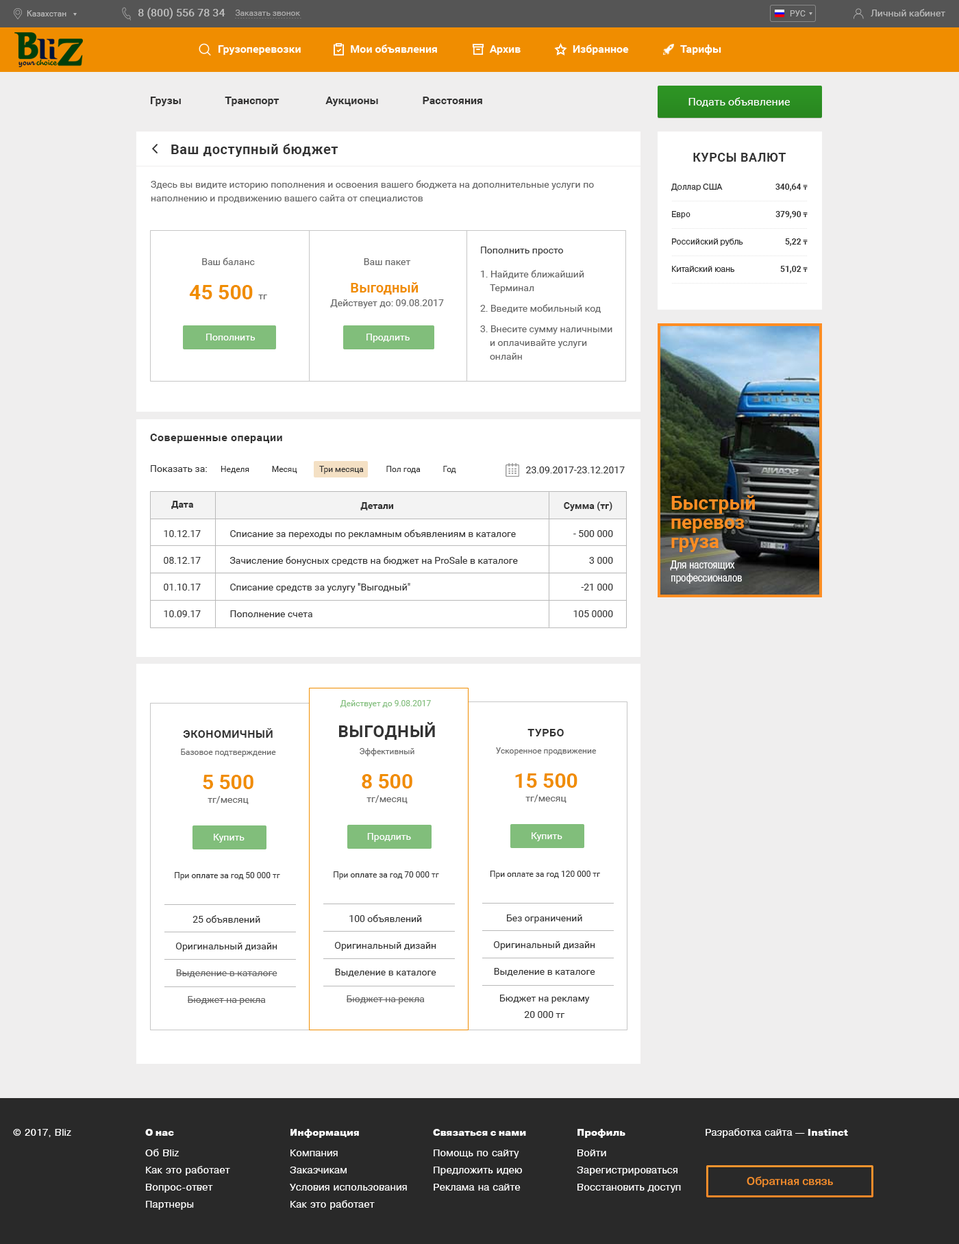
<style>
.page{position:relative;width:959px;height:1244px;background:#efeeee}
.page>*{position:absolute;margin:0}
.t1{font:11px "Roboto-Bold";color:#333333}
.t2{font:11px "Roboto-Regular";color:#ffffff}
.t3{font:13.7px "Roboto-Bold";letter-spacing:0.03em;color:#333333}
.t4{font:12.3px "Roboto-Bold";letter-spacing:0.03em;color:#333333;text-transform:uppercase}
.t5{font:9.6px/13.7px "Roboto-Regular";color:#666666}
.t6{font:8.2px/27.4px "PragmaticaBook-Reg";color:#333333}
.t7{font:9.6px/27.4px "PragmaticaBlack";letter-spacing:0.03em;color:#333333;text-transform:uppercase}
.t8{font:8.2px/27.4px "Roboto-Bold";color:#303030}
.t9{font:6.8px/27.4px "TimesNewRomanPS-BoldMT";color:#303030}
.t10{font:20.5px/13.7px "Roboto-Bold";color:#f08d00}
.t11{font:9.6px/16.4px "Roboto-Regular";color:#333333}
.t12{font:13.7px/13.7px "Roboto-Bold";color:#f08d00}
.t13{font:9.6px "Roboto-Regular";color:#ffffff}
.t14{font:11px "Roboto-Bold";letter-spacing:0.03em;color:#333333}
.t15{font:9.6px "Roboto-Regular";color:#333333}
.t16{font:8.2px "Roboto-Regular";color:#333333}
.t17{font:9.6px "Roboto-Bold";color:#333333}
.t18{font:8.2px "Roboto-Regular";color:#81be7b}
.t19{font:8.2px/13.7px "Roboto-Regular";color:#333333}
.t20{font:16.4px/13.7px "Roboto-Bold";letter-spacing:0.03em;color:#333333;text-transform:uppercase}
.t21{font:8.2px/13.7px "Roboto-Regular";color:#666666}
.t22{font:11px/13.7px "Roboto-Bold";letter-spacing:0.03em;color:#333333;text-transform:uppercase}
.t23{font:9.6px/16.4px "Roboto-Regular";color:#666666}
</style>
<div class="page">
<p class="t1" style="left:151px;top:97px;width:331px;height:9px">Грузы                Транспорт                 Аукционы                Расстояния</p>
<p class="t2" style="left:688px;top:97px;width:102px;height:10px">Подать объявление</p>
<p class="t3" style="left:171px;top:144px;width:167px;height:13px">Ваш доступный бюджет</p>
<p class="t4" style="left:693px;top:153px;width:93px;height:9px">Курсы валют</p>
<p class="t5" style="left:151px;top:180px;width:443px;height:23px">Здесь вы видите историю пополнения и освоения вашего бюджета на дополнительные услуги по наполнению и продвижению вашего сайта от специалистов</p>
<p class="t6" style="left:671px;top:184px;width:72px;height:88px;text-align:center"><span class="t7"><br></span>Доллар США<br>Евро<br>Российский рубль<br>Китайский юань</p>
<p class="t8" style="left:775px;top:184px;width:32px;height:89px;text-align:right">340,64 <span class="t9">₸<br></span>379,90 <span class="t9">₸<br></span>5,22 <span class="t9">₸<br></span>51,02 <span class="t9">₸</span></p>
<p class="t5" style="left:189px;top:258px;width:78px;height:41px;text-align:center">Ваш баланс<br><span class="t10">45 500 </span>тг</p>
<p class="t5" style="left:480px;top:247px;width:132px;height:113px"><span class="t11">Пополнить просто<br></span>1. Найдите ближайший Терминал<br>2. Введите мобильный код<br>3. Внесите сумму наличными и оплачивайте услуги онлайн</p>
<p class="t5" style="left:330px;top:258px;width:114px;height:50px;text-align:center">Ваш пакет<br><span class="t12">Выгодный </span><br>Действует до: 09.08.2017</p>
<p class="t13" style="left:206px;top:334px;width:49px;height:6px">Пополнить</p>
<p class="t13" style="left:366px;top:334px;width:44px;height:8px">Продлить</p>
<p class="t14" style="left:150px;top:434px;width:132px;height:9px">Совершенные операции</p>
<p class="t15" style="left:151px;top:465px;width:56px;height:7px">Показать за:</p>
<p class="t16" style="left:221px;top:466px;width:235px;height:8px">Неделя           Месяц           Три месяца           Пол года           Год</p>
<p class="t15" style="left:526px;top:466px;width:99px;height:7px">23.09.2017-23.12.2017</p>
<p class="t17" style="left:171px;top:501px;width:22px;height:8px">Дата</p>
<p class="t17" style="left:360px;top:502px;width:34px;height:8px">Детали</p>
<p class="t17" style="left:564px;top:501px;width:48px;height:10px">Сумма (тг)</p>
<p class="t11" style="left:164px;top:530px;width:37px;height:87px">10.12.17<br>08.12.17<br>01.10.17<br>10.09.17</p>
<p class="t11" style="left:229px;top:529px;width:289px;height:88px">Списание за переходы по рекламным объявлениям в каталоге<br>Зачисление бонусных средств на бюджет на ProSale в каталоге<br>Списание средств за услугу "Выгодный"<br>Пополнение счета</p>
<p class="t11" style="left:573px;top:530px;width:40px;height:87px;text-align:right">- 500 000<br>3 000<br>-21 000<br>105 0000</p>
<p class="t18" style="left:340px;top:700px;width:91px;height:8px">Действует до 9.08.2017</p>
<p class="t19" style="left:334px;top:722px;width:105px;height:157px;text-align:center"><span class="t20">Выгодный<br></span><span class="t21">Эффективный<br></span><span class="t10">8 500<br></span><span class="t5">тг/месяц<br></span><br>При оплате за год 70 000 тг</p>
<p class="t19" style="left:175px;top:728px;width:105px;height:152px;text-align:center"><span class="t22">Экономичный<br></span><span class="t21">Базовое подтверждение<br></span><span class="t10">5 500<br></span><span class="t5">тг/месяц<br></span><br>При оплате за год 50 000 тг</p>
<p class="t19" style="left:490px;top:729px;width:110px;height:150px;text-align:center"><span class="t22">Турбо<br></span><span class="t21">Ускоренное продвижение<br></span><span class="t10">15 500<br></span><span class="t5">тг/месяц<br></span><br>При оплате за год 120 000 тг</p>
<p class="t13" style="left:214px;top:833px;width:30px;height:9px">Купить</p>
<p class="t13" style="left:367px;top:833px;width:44px;height:9px">Продлить</p>
<p class="t13" style="left:531px;top:832px;width:31px;height:9px">Купить</p>
<p class="t23" style="left:175px;top:915px;width:102px;height:90px;text-align:center"><span class="t11">25 объявлений<br>Оригинальный дизайн<br></span>Выделение в каталоге<br>Бюджет на рекла</p>
<p class="t11" style="left:334px;top:914px;width:102px;height:90px;text-align:center">100 объявлений<br>Оригинальный дизайн<br>Выделение в каталоге<br><span class="t23">Бюджет на рекла</span></p>
<p class="t11" style="left:493px;top:914px;width:102px;height:104px;text-align:center">Без ограничений<br>Оригинальный дизайн<br>Выделение в каталоге<br>Бюджет на рекламу <br>20 000 тг</p>
</div>
